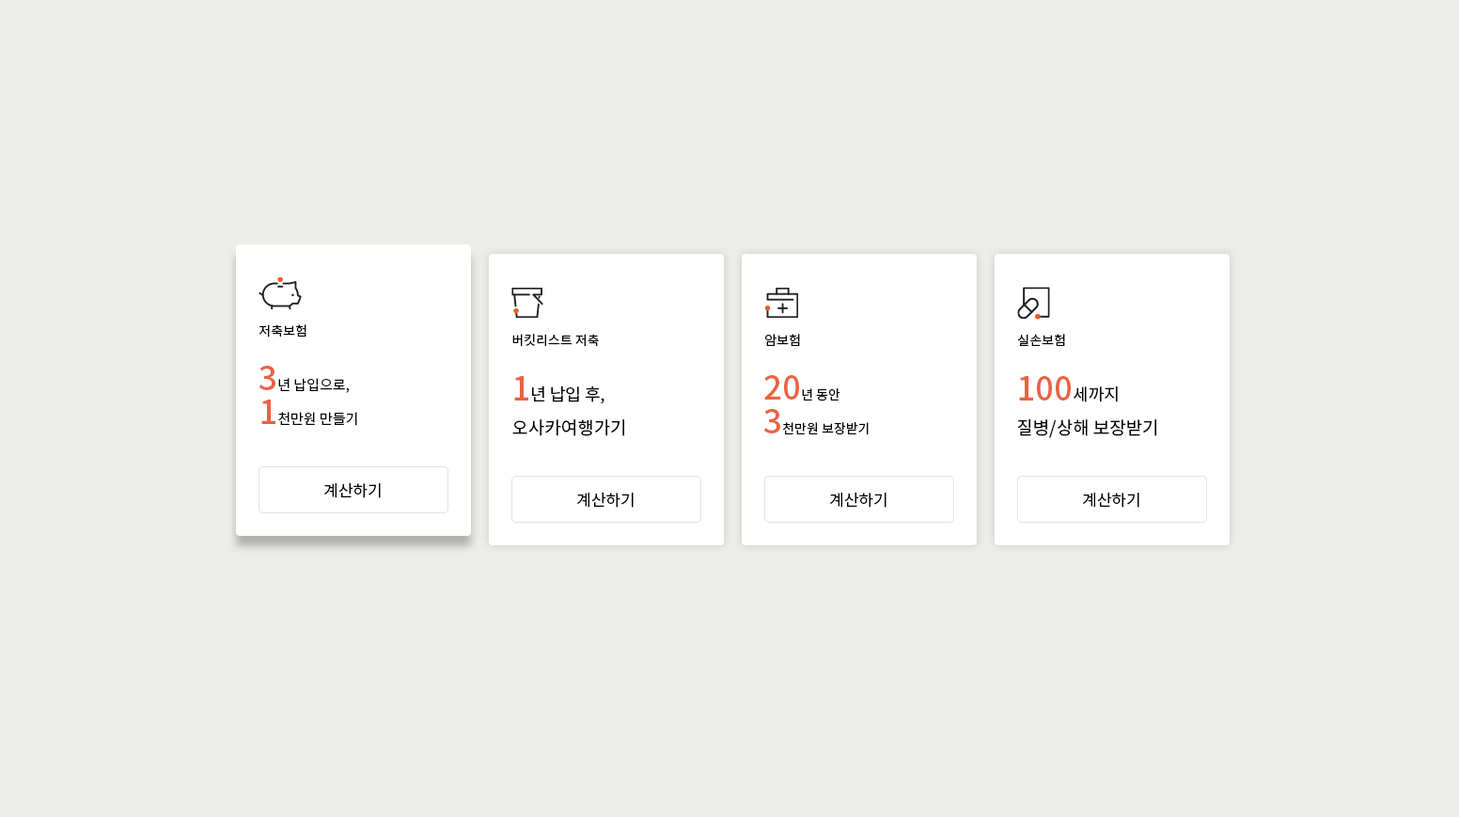
<style>
.page{position:relative;width:1459px;height:817px;background:#ecede8}
.page>*{position:absolute;margin:0}
.t1{font:13.2px "NotoSansKR-Regular";color:#000000}
.t2{font:14.1px/33.9px "NotoSansKR-Regular";color:#000000}
.t3{font:32.9px/33.9px "NotoSansKR-Medium";color:#eb6242}
.t4{font:16.9px/33.9px "NotoSansKR-Regular";color:#000000}
.t5{font:17.9px/33.9px "NotoSansKR-Regular";color:#000000}
.t6{font:13.2px/33.9px "NotoSansKR-Regular";color:#000000}
.t7{font:16px "NotoSansKR-Regular";color:#000000}
</style>
<div class="page">
<p class="t1" style="left:259px;top:324px;width:48px;height:14px">저축보험</p>
<p class="t1" style="left:512px;top:334px;width:87px;height:13px">버킷리스트 저축</p>
<p class="t1" style="left:765px;top:334px;width:35px;height:12px">암보험</p>
<p class="t1" style="left:1017px;top:334px;width:48px;height:12px">실손보험</p>
<p class="t2" style="left:259px;top:366px;width:98px;height:60px"><span class="t3">3</span>년 납입으로,<br><span class="t3">1</span>천만원 만들기</p>
<p class="t4" style="left:512px;top:376px;width:112px;height:60px"><span class="t3">1</span>년 납입 후,<br><span class="t5">오사카여행가기</span></p>
<p class="t6" style="left:764px;top:375px;width:105px;height:60px"><span class="t3">20</span>년 동안<br><span class="t3">3</span>천만원 보장받기</p>
<p class="t5" style="left:1017px;top:376px;width:140px;height:62px"><span class="t3">100</span><span class="t4">세까지<br></span>질병/상해 보장받기</p>
<p class="t7" style="left:324px;top:482px;width:57px;height:16px">계산하기</p>
<p class="t7" style="left:577px;top:492px;width:57px;height:16px">계산하기</p>
<p class="t7" style="left:830px;top:492px;width:57px;height:16px">계산하기</p>
<p class="t7" style="left:1083px;top:492px;width:57px;height:16px">계산하기</p>
</div>
